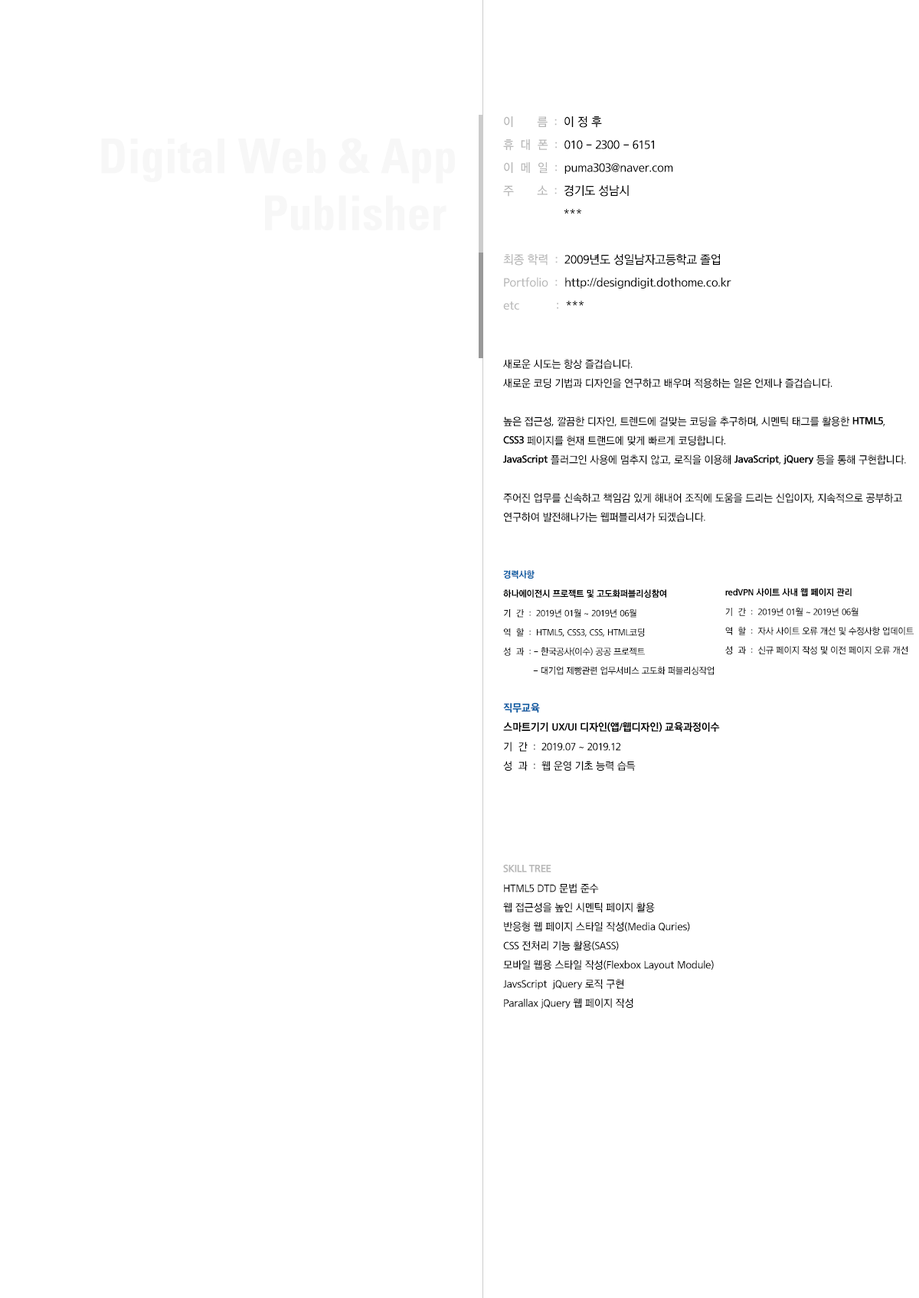
<style>
.page{position:relative;width:919px;height:1298px;background:#ffffff}
.page>*{position:absolute;margin:0}
.t1{font:12.2px/23px "THELuxGoM_U";letter-spacing:-0.025em;color:#000000;scale:0.95 1}
.t2{font:12.2px/23px "THELuxGoM_U";letter-spacing:-0.025em;color:#b6b6b6;scale:0.95 1}
.t3{font:12.2px/23px "THELuxGoM_U";letter-spacing:-0.025em;color:#b7b7b7;scale:0.95 1}
.t4{font:47.5px "Univeconbol";color:#f7f7f7}
.t5{font:9.2px/19.1px "THELuxGoM_U";letter-spacing:-0.025em;color:#000000;scale:0.95 1}
.t6{font:10.7px/19.1px "THELuxGoM_U";letter-spacing:-0.025em;color:#000000;scale:0.95 1}
.t7{font:10.7px/19.1px "THELuxGoEB";letter-spacing:-0.025em;color:#000000;scale:0.95 1}
.t8{font:9.2px/19.1px "THELuxGoEB";letter-spacing:-0.025em;color:#0057a0;scale:0.95 1}
.t9{font:9.2px/19.1px "THELuxGoEB";letter-spacing:-0.025em;color:#000000;scale:0.95 1}
.t10{font:10.7px/19.1px "THELuxGoEB";letter-spacing:-0.025em;color:#0057a0;scale:0.95 1}
.t11{font:10.7px/19.1px "THELuxGoEB";letter-spacing:-0.025em;color:#b7b7b7;scale:0.95 1}
</style>
<div class="page">
<p class="t1" style="left:503px;top:116px;width:228px;height:194px"><span class="t2">이       름  :</span>  이 정 후<br><span class="t3">휴  대  폰  :</span>  010 - 2300 - 6151<br><span class="t3">이  메  일  :</span>  puma303@naver.com<br><span class="t3">주       소  :</span>  경기도 성남시<br>                  ***<br><br><span class="t3">최종 학력  :</span>  2009년도 성일남자고등학교 졸업<br><span class="t3">Portfolio  :</span>  http://designdigit.dothome.co.kr<br><span class="t3">etc           :</span>  ***</p>
<p class="t4" style="left:101px;top:138px;width:354px;height:92px;text-align:right">Digital Web &amp; App<br>Publisher</p>
<p class="t5" style="left:503px;top:359px;width:403px;height:413px"><span class="t6">새로운 시도는 항상 즐겁습니다.<br>새로운 코딩 기법과 디자인을 연구하고 배우며 적용하는 일은 언제나 즐겁습니다.<br><br>높은 접근성, 깔끔한 디자인, 트렌드에 걸맞는 코딩을 추구하며, 시멘틱 태그를 활용한 </span><span class="t7">HTML5</span><span class="t6">,<br></span><span class="t7">CSS3</span><span class="t6"> 페이지를 현재 트랜드에 맞게 빠르게 코딩합니다.<br></span><span class="t7">JavaScript</span><span class="t6"> 플러그인 사용에 멈추지 않고, 로직을 이용해 </span><span class="t7">JavaScript</span><span class="t6">, </span><span class="t7">jQuery</span><span class="t6"> 등을 통해 구현합니다.<br><br>주어진 업무를 신속하고 책임감 있게 해내어 조직에 도움을 드리는 신입이자, 지속적으로 공부하고<br>연구하여 발전해나가는 웹퍼블리셔가 되겠습니다.<br><br><br></span><span class="t8">경력사항<br></span><span class="t9">하나에이전시 프로젝트 및 고도화퍼블리싱참여<br></span>기  간  :  2019년 01월 ~ 2019년 06월<br>역  할  :  HTML5, CSS3, CSS, HTML코딩<br>성  과  : - 한국공사(이수) 공공 프로젝트<br>            - 대기업 제빵관련 업무서비스 고도화 퍼블리싱작업<br><br><span class="t10">직무교육<br></span><span class="t7">스마트기기 UX/UI 디자인(앱/웹디자인) 교육과정이수<br></span><span class="t6">기  간  :  2019.07 ~ 2019.12<br>성  과  :  웹 운영 기초 능력 습득</span></p>
<p class="t5" style="left:725px;top:588px;width:188px;height:66px"><span class="t9">redVPN 사이트 사내 웹 페이지 관리 <br></span>기  간  :  2019년 01월 ~ 2019년 06월<br>역  할  :  자사 사이트 오류 개선 및 수정사항 업데이트<br>성  과  :  신규 페이지 작성 및 이전 페이지 오류 개선</p>
<p class="t6" style="left:503px;top:864px;width:210px;height:145px"><span class="t11">SKILL TREE<br></span>HTML5 DTD 문법 준수<br>웹 접근성을 높인 시멘틱 페이지 활용<br>반응형 웹 페이지 스타일 작성(Media Quries)<br>CSS 전처리 기능 활용(SASS)<br>모바일 웹용 스타일 작성(Flexbox Layout Module)<br>JavsScript  jQuery 로직 구현<br>Parallax jQuery 웹 페이지 작성</p>
</div>
